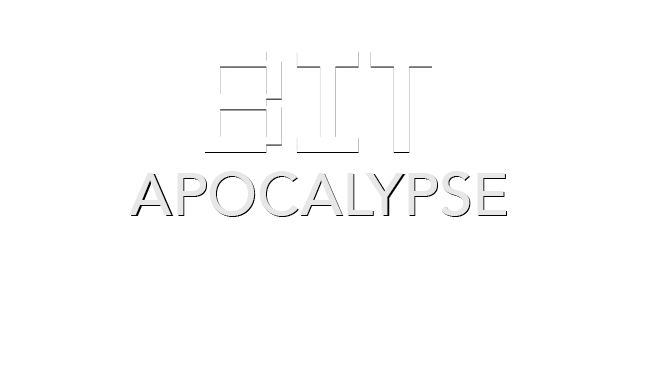
<style>
.page{position:relative;width:659px;height:371px;background:#ffffff}
.page>*{position:absolute;margin:0}
.t1{font:60px "Avenir-Medium";color:#e7e7e7}
</style>
<div class="page">
<p class="t1" style="left:131px;top:172px;width:376px;height:45px">APOCALYPSE</p>
</div>
